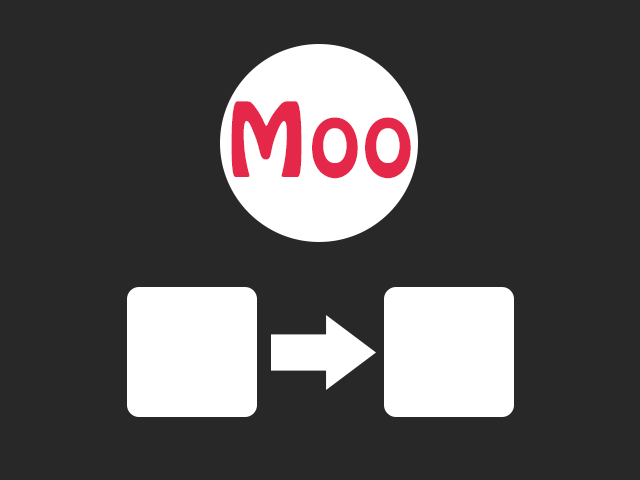
<style>
.page{position:relative;width:640px;height:480px;background:#282828}
.page>*{position:absolute;margin:0}
.t1{font:91.1px "HoboStd";letter-spacing:0.04em;color:#e5274a}
</style>
<div class="page">
<p class="t1" style="left:231px;top:101px;width:180px;height:78px">Moo</p>
</div>
